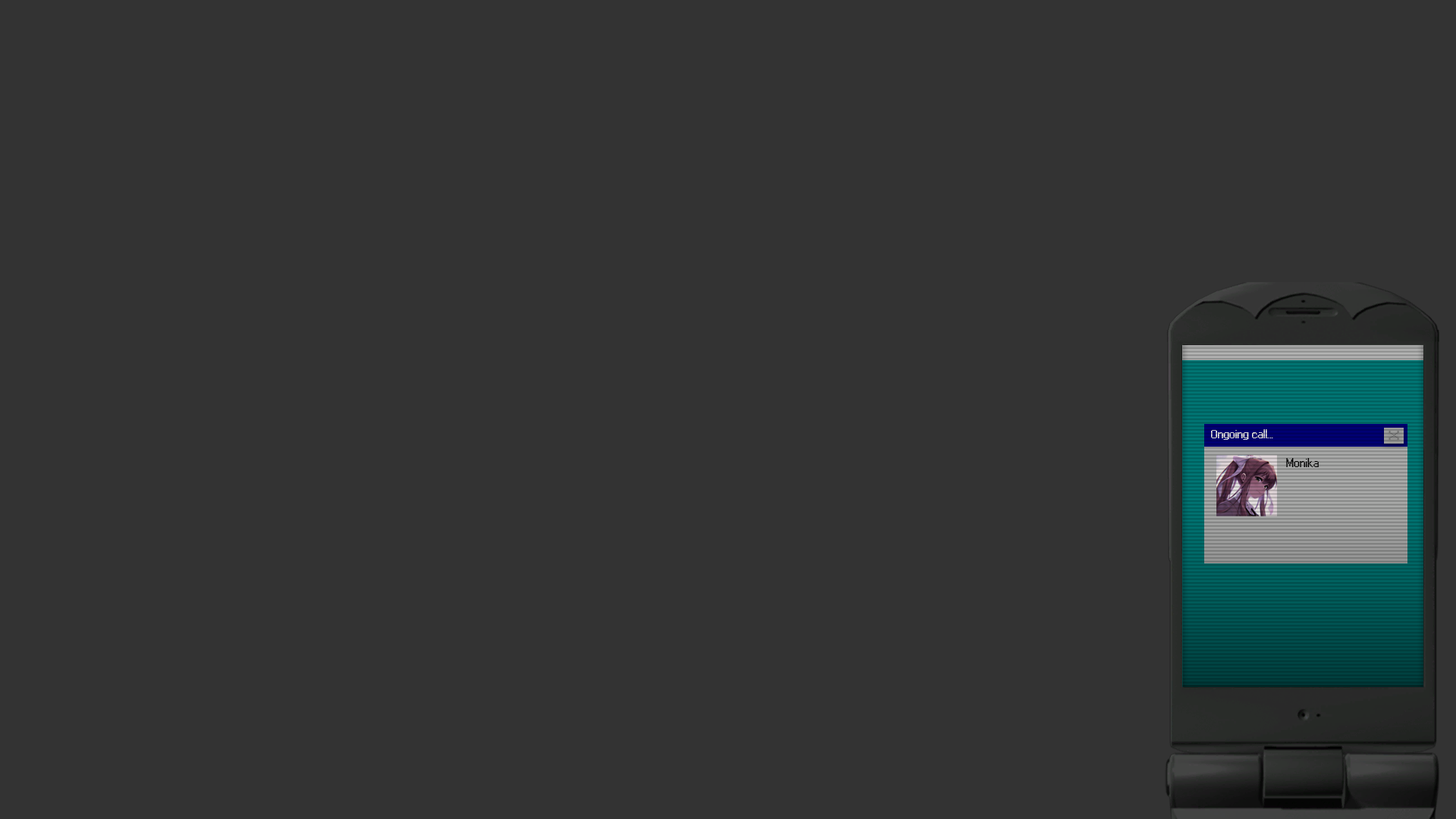
<style>
.page{position:relative;width:1456px;height:819px;background:#333333}
.page>*{position:absolute;margin:0}
.t1{font:12.2px "Windows"}
.t2{font:12.2px "Windows";color:#787878;scale:1.41 1}
.t3{font:12.2px "Windows";color:#000000}
</style>
<div class="page">
<p class="t1" style="left:1211px;top:429px;width:62px;height:11px">Ongoing call...</p>
<p class="t2" style="left:1388px;top:431px;width:11px;height:9px">X</p>
<p class="t3" style="left:1286px;top:458px;width:33px;height:9px">Monika</p>
</div>
